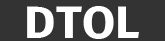
<style>
.page{position:relative;width:165px;height:41px;background:#333333}
.page>*{position:absolute;margin:0}
.t1{font:45.6px "FiraSans-Bold";color:#ffffff;scale:1.05 1}
</style>
<div class="page">
<p class="t1" style="left:27px;top:6px;width:112px;height:33px">DTOL</p>
</div>
